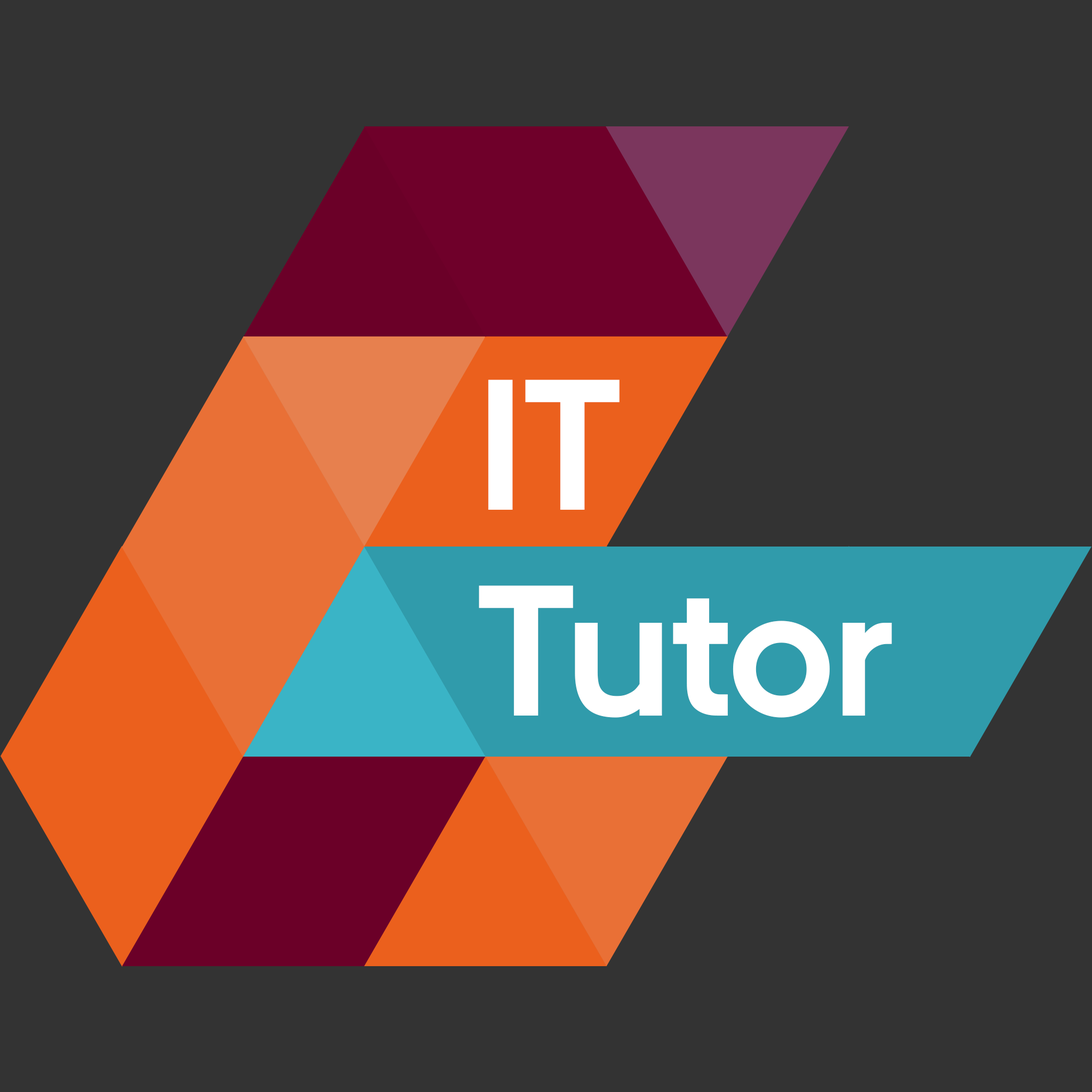
<style>
.page{position:relative;width:1092px;height:1092px;background:#333333}
.page>*{position:absolute;margin:0}
.t1{font:185.7px/205.5px "AUPassata-Bold";color:#ffffff}
</style>
<div class="page">
<p class="t1" style="left:479px;top:380px;width:413px;height:338px">IT<br>Tutor</p>
</div>
